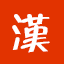
<style>
.page{position:relative;width:64px;height:64px;background:#e23300}
.page>*{position:absolute;margin:0}
.t1{font:42px "FZZBHFW--GB1-0";color:#ffffff}
</style>
<div class="page">
<p class="t1" style="left:12px;top:13px;width:38px;height:40px">汉</p>
</div>
